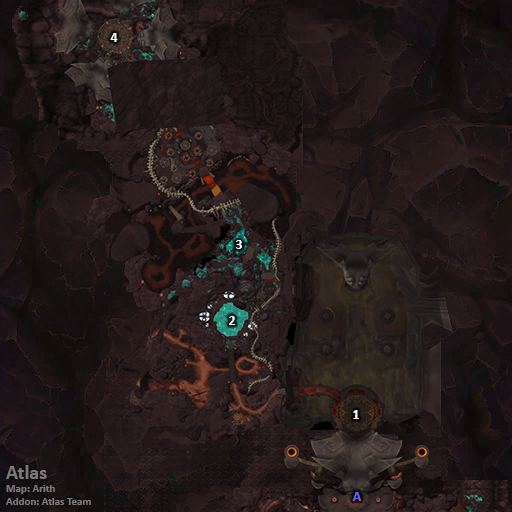
<style>
.page{position:relative;width:512px;height:512px}
.page>*{position:absolute;margin:0}
.t1{font:14px "Calibri-Bold";color:#ffffff}
.t2{font:11px "Calibri-Bold";color:#7b7a7a}
.t3{font:20px "Calibri-Bold";color:#7b7a7a}
.t4{font:14px "Calibri-Bold";color:#6666ff}
</style>
<div class="page">
<p class="t1" style="left:110px;top:33px;width:8px;height:9px">4</p>
<p class="t1" style="left:236px;top:240px;width:6px;height:9px">3</p>
<p class="t1" style="left:229px;top:316px;width:7px;height:9px">2</p>
<p class="t1" style="left:353px;top:410px;width:6px;height:9px">1</p>
<p class="t2" style="left:6px;top:465px;width:85px;height:40px"><span class="t3">Atlas<br></span>Map: Arith<br>Addon: Atlas Team</p>
<p class="t4" style="left:352px;top:492px;width:9px;height:9px">A</p>
</div>
